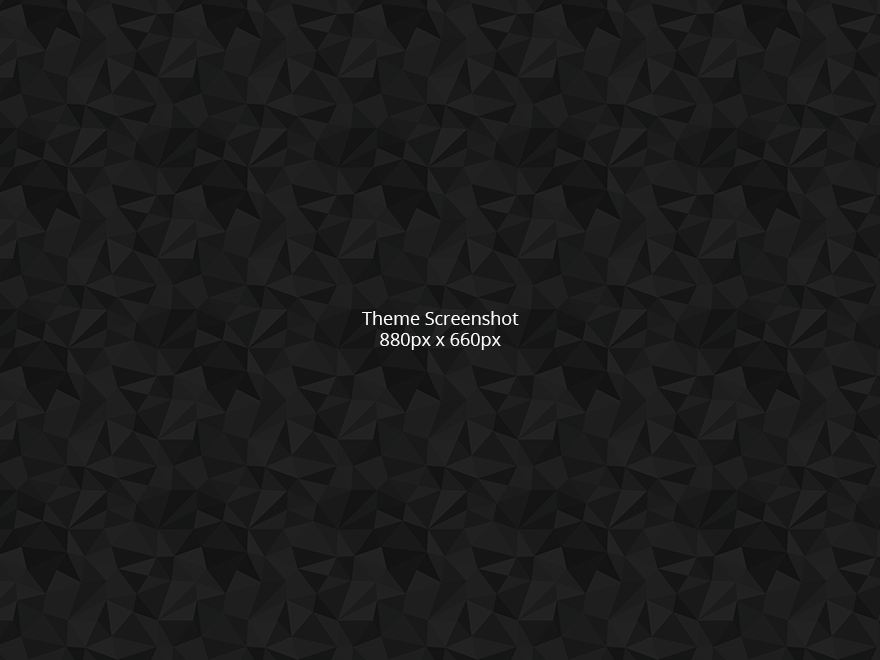
<style>
.page{position:relative;width:880px;height:660px}
.page>*{position:absolute;margin:0}
.t1{font:18px "OpenSans";color:#fdfbfb}
</style>
<div class="page">
<p class="t1" style="left:362px;top:311px;width:157px;height:39px;text-align:center">Theme Screenshot<br>880px x 660px</p>
</div>
